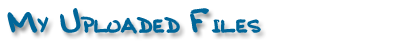
<style>
.page{position:relative;width:400px;height:45px;background:#ffffff}
.page>*{position:absolute;margin:0}
.t1{font:18px "BobbiesHand";color:#006699}
.t2{font:30px "BobbiesHand";color:#006699}
</style>
<div class="page">
<p class="t1" style="left:8px;top:9px;width:252px;height:24px"><span class="t2">M</span>Y <span class="t2">U</span>PLOADED <span class="t2">F</span>ILES</p>
</div>
